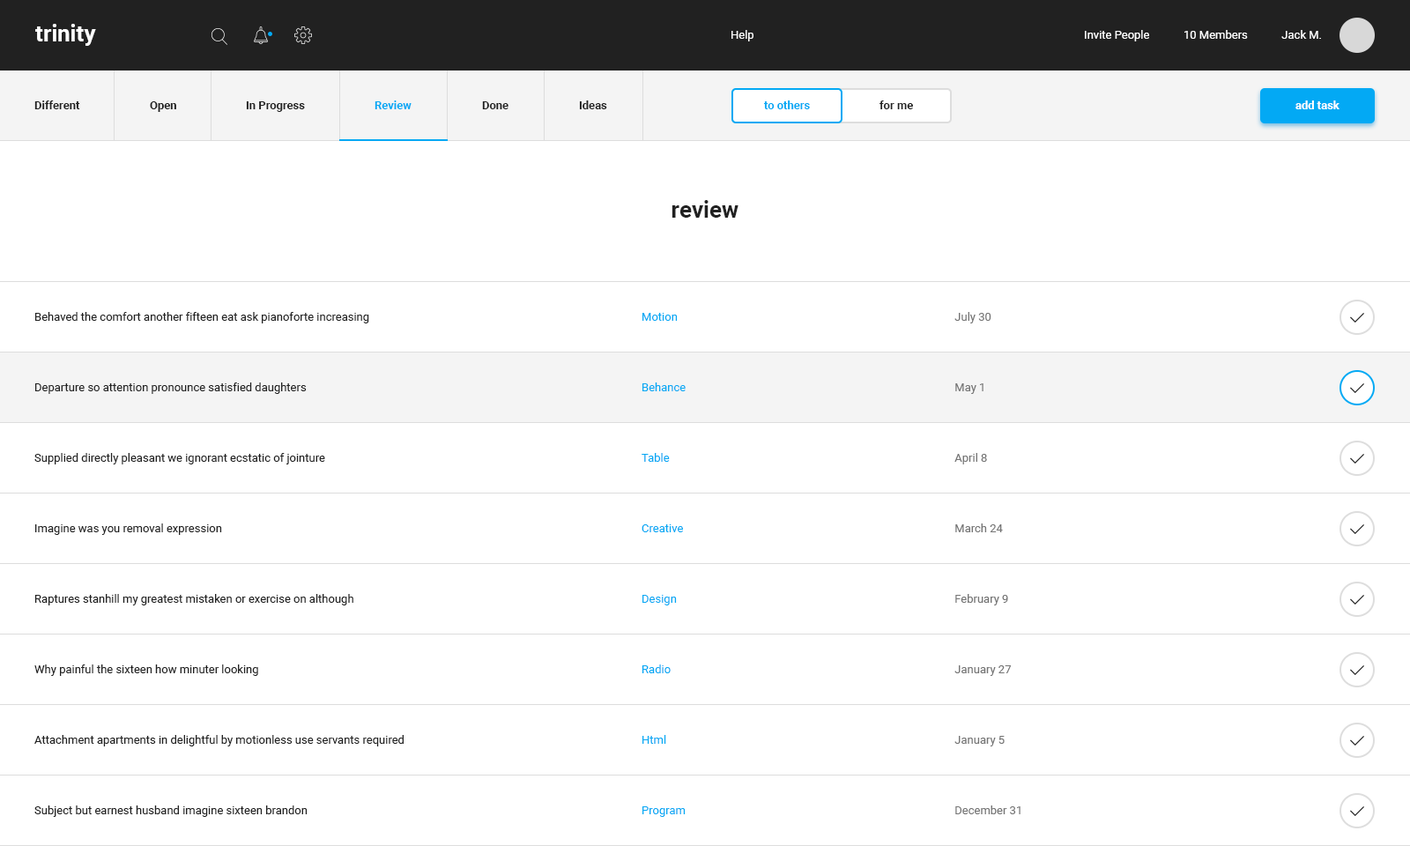
<style>
.page{position:relative;width:1410px;height:846px;background:#ffffff}
.page>*{position:absolute;margin:0}
.t1{font:22.9px "Roboto-Bold";color:#ffffff}
.t2{font:11.5px "Roboto-Regular";color:#ffffff}
.t3{font:11.5px "Roboto-Bold";color:#212121}
.t4{font:11.5px "Roboto-Bold";color:#03a9f4}
.t5{font:11.5px "Roboto-Bold";color:#ffffff}
.t6{font:22.9px "Roboto-Bold";color:#212121}
.t7{font:11.5px "Roboto-Regular";color:#212121}
.t8{font:11.5px "Roboto-Regular";color:#03a9f4}
.t9{font:11.5px "Roboto-Regular";color:#757575}
</style>
<div class="page">
<p class="t1" style="left:35px;top:24px;width:61px;height:22px">trinity</p>
<p class="t2" style="left:731px;top:30px;width:22px;height:11px">Help</p>
<p class="t2" style="left:1085px;top:30px;width:236px;height:11px">Invite People            10 Members            Jack M.</p>
<p class="t3" style="left:34px;top:100px;width:46px;height:9px">Different</p>
<p class="t3" style="left:150px;top:101px;width:26px;height:11px">Open</p>
<p class="t3" style="left:246px;top:101px;width:59px;height:11px">In Progress</p>
<p class="t4" style="left:374px;top:100px;width:37px;height:9px">Review</p>
<p class="t3" style="left:482px;top:101px;width:26px;height:8px">Done</p>
<p class="t3" style="left:579px;top:100px;width:28px;height:9px">Ideas</p>
<p class="t4" style="left:763px;top:100px;width:47px;height:9px">to others</p>
<p class="t3" style="left:879px;top:100px;width:34px;height:9px">for me</p>
<p class="t5" style="left:1295px;top:100px;width:44px;height:9px">add task</p>
<p class="t6" style="left:671px;top:200px;width:67px;height:18px">review</p>
<p class="t7" style="left:35px;top:312px;width:334px;height:11px">Behaved the comfort another fifteen eat ask pianoforte increasing</p>
<p class="t8" style="left:642px;top:313px;width:36px;height:8px">Motion</p>
<p class="t9" style="left:954px;top:312px;width:37px;height:11px">July 30</p>
<p class="t7" style="left:35px;top:382px;width:272px;height:12px">Departure so attention pronounce satisfied daughters</p>
<p class="t8" style="left:642px;top:382px;width:43px;height:9px">Behance</p>
<p class="t9" style="left:955px;top:383px;width:28px;height:11px">May 1</p>
<p class="t7" style="left:34px;top:453px;width:291px;height:11px">Supplied directly pleasant we ignorant ecstatic of jointure</p>
<p class="t8" style="left:641px;top:453px;width:29px;height:9px">Table</p>
<p class="t9" style="left:954px;top:453px;width:33px;height:11px">April 8</p>
<p class="t7" style="left:35px;top:523px;width:187px;height:12px">Imagine was you removal expression</p>
<p class="t8" style="left:641px;top:524px;width:42px;height:8px">Creative</p>
<p class="t9" style="left:955px;top:523px;width:48px;height:9px">March 24</p>
<p class="t7" style="left:34px;top:594px;width:319px;height:11px">Raptures stanhill my greatest mistaken or exercise on although</p>
<p class="t9" style="left:955px;top:594px;width:53px;height:11px">February 9</p>
<p class="t8" style="left:642px;top:595px;width:35px;height:10px">Design</p>
<p class="t7" style="left:34px;top:664px;width:224px;height:12px">Why painful the sixteen how minuter looking</p>
<p class="t8" style="left:641px;top:664px;width:30px;height:9px">Radio</p>
<p class="t9" style="left:954px;top:665px;width:57px;height:11px">January 27</p>
<p class="t7" style="left:34px;top:735px;width:370px;height:11px">Attachment apartments in delightful by motionless use servants required</p>
<p class="t8" style="left:642px;top:735px;width:24px;height:9px">Html</p>
<p class="t9" style="left:954px;top:736px;width:50px;height:10px">January 5</p>
<p class="t7" style="left:34px;top:805px;width:274px;height:12px">Subject but earnest husband imagine sixteen brandon</p>
<p class="t8" style="left:642px;top:806px;width:43px;height:11px">Program</p>
<p class="t9" style="left:955px;top:805px;width:65px;height:9px">December 31</p>
</div>
